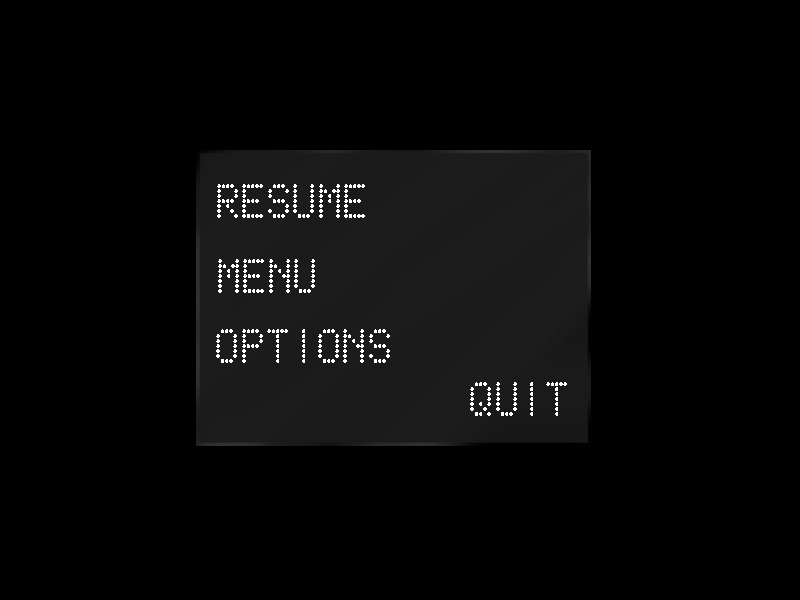
<style>
.page{position:relative;width:800px;height:600px;background:#000000}
.page>*{position:absolute;margin:0}
.t1{font:48px "ScoreBoard";color:#ffffff}
</style>
<div class="page">
<p class="t1" style="left:217px;top:184px;width:148px;height:34px">Resume</p>
<p class="t1" style="left:218px;top:259px;width:97px;height:34px">Menu</p>
<p class="t1" style="left:216px;top:329px;width:174px;height:34px">Options</p>
<p class="t1" style="left:470px;top:382px;width:97px;height:34px">quit</p>
</div>
